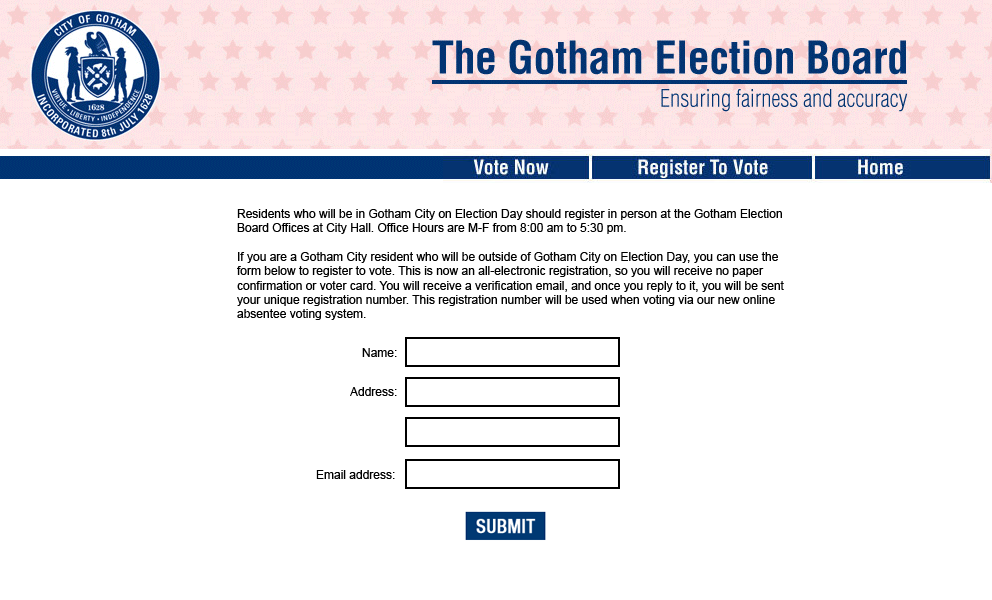
<style>
.page{position:relative;width:992px;height:600px;background:#ffffff}
.page>*{position:absolute;margin:0}
.t1{font:12px "ArialMT";color:#000000}
</style>
<div class="page">
<p class="t1" style="left:237px;top:209px;width:547px;height:111px">Residents who will be in Gotham City on Election Day should register in person at the Gotham Election Board Offices at City Hall. Office Hours are M-F from 8:00 am to 5:30 pm.<br><br>If you are a Gotham City resident who will be outside of Gotham City on Election Day, you can use the form below to register to vote. This is now an all-electronic registration, so you will receive no paper confirmation or voter card. You will receive a verification email, and once you reply to it, you will be sent your unique registration number. This registration number will be used when voting via our new online absentee voting system.</p>
<p class="t1" style="left:362px;top:348px;width:35px;height:9px">Name:</p>
<p class="t1" style="left:350px;top:387px;width:47px;height:9px">Address:</p>
<p class="t1" style="left:316px;top:470px;width:79px;height:9px">Email address:</p>
</div>
